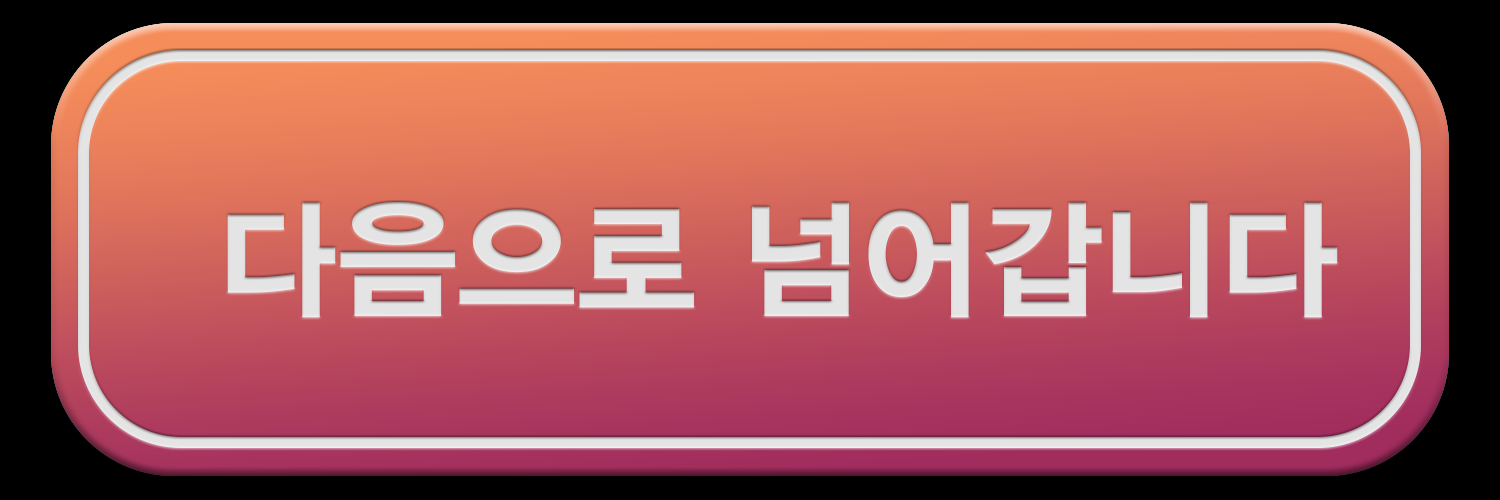
<style>
.page{position:relative;width:1500px;height:500px}
.page>*{position:absolute;margin:0}
.t1{font:130px "YDIYGO350";color:#e4e4e4}
</style>
<div class="page">
<p class="t1" style="left:227px;top:202px;width:1111px;height:116px">다음으로 넘어갑니다</p>
</div>
